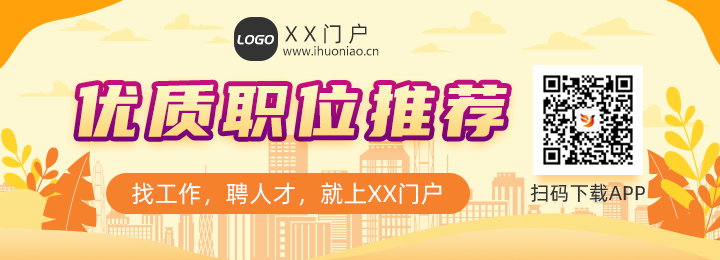
<style>
.page{position:relative;width:720px;height:260px;background:#fef8d2}
.page>*{position:absolute;margin:0}
.t1{font:22px "AlibabaPuHuiTi-Regular";letter-spacing:0.24em;color:#333333}
.t2{font:14px "PangMenZhengDao";color:#ffffff;text-transform:uppercase;font-style:italic}
.t3{font:12px "MicrosoftYaHei";color:#333333}
.t4{font:72px "YouSheBiaoTiHei";letter-spacing:0.1em}
.t5{font:24px "AlibabaPuHuiTi-Regular";color:#ffffff}
.t6{font:20px "AlibabaPuHuiTiR";color:#333333}
</style>
<div class="page">
<p class="t1" style="left:285px;top:23px;width:82px;height:21px">XX门户</p>
<p class="t2" style="left:237px;top:35px;width:37px;height:10px">logo</p>
<p class="t3" style="left:283px;top:45px;width:96px;height:11px">www.ihuoniao.cn</p>
<p class="t4" style="left:78px;top:84px;width:429px;height:53px">优质职位推荐</p>
<p class="t5" style="left:131px;top:182px;width:311px;height:24px">找工作，聘人才，就上XX门户</p>
<p class="t6" style="left:530px;top:183px;width:115px;height:19px">扫码下载APP</p>
</div>
